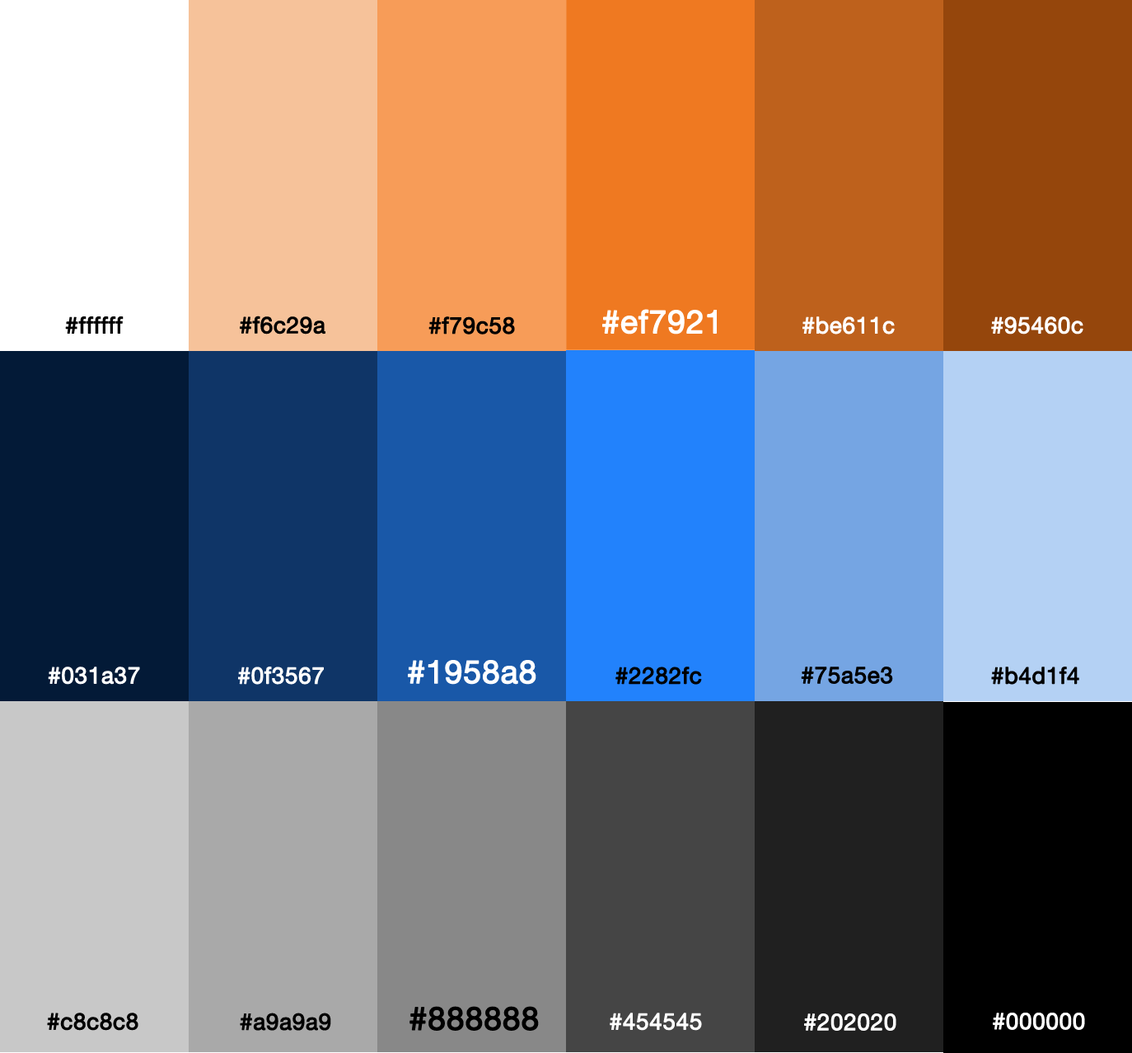
<style>
.page{position:relative;width:1132px;height:1053px}
.page>*{position:absolute;margin:0}
.t1{font:22.9px "HelveticaNeue";color:#000000;font-weight:bold}
.t2{font:32px "HelveticaNeue";color:#ffffff;font-weight:bold}
.t3{font:22.9px "HelveticaNeue";color:#ffffff;font-weight:bold}
.t4{font:32px "HelveticaNeue";color:#000000;font-weight:bold}
</style>
<div class="page">
<p class="t1" style="left:65px;top:316px;width:59px;height:18px">#ffffff</p>
<p class="t1" style="left:240px;top:316px;width:86px;height:19px">#f6c29a</p>
<p class="t1" style="left:429px;top:316px;width:86px;height:19px">#f79c58</p>
<p class="t2" style="left:602px;top:309px;width:115px;height:26px">#ef7921</p>
<p class="t3" style="left:803px;top:316px;width:92px;height:19px">#be611c</p>
<p class="t3" style="left:991px;top:316px;width:93px;height:19px">#95460c</p>
<p class="t2" style="left:408px;top:660px;width:128px;height:25px">#1958a8</p>
<p class="t3" style="left:48px;top:667px;width:92px;height:18px">#031a37</p>
<p class="t3" style="left:238px;top:667px;width:86px;height:18px">#0f3567</p>
<p class="t1" style="left:616px;top:667px;width:86px;height:18px">#2282fc</p>
<p class="t1" style="left:801px;top:667px;width:92px;height:17px">#75a5e3</p>
<p class="t1" style="left:991px;top:667px;width:89px;height:18px">#b4d1f4</p>
<p class="t1" style="left:47px;top:1013px;width:91px;height:18px">#c8c8c8</p>
<p class="t1" style="left:240px;top:1013px;width:91px;height:18px">#a9a9a9</p>
<p class="t4" style="left:410px;top:1006px;width:129px;height:25px">#888888</p>
<p class="t3" style="left:610px;top:1013px;width:92px;height:18px">#454545</p>
<p class="t3" style="left:804px;top:1014px;width:93px;height:17px">#202020</p>
<p class="t3" style="left:993px;top:1013px;width:92px;height:17px">#000000</p>
</div>
